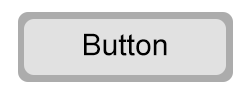
<style>
.page{position:relative;width:250px;height:100px;background:#e1e1e1}
.page>*{position:absolute;margin:0}
.t1{font:30px "ArialMT";color:#000000}
</style>
<div class="page">
<p class="t1" style="left:84px;top:33px;width:83px;height:23px">Button</p>
</div>
